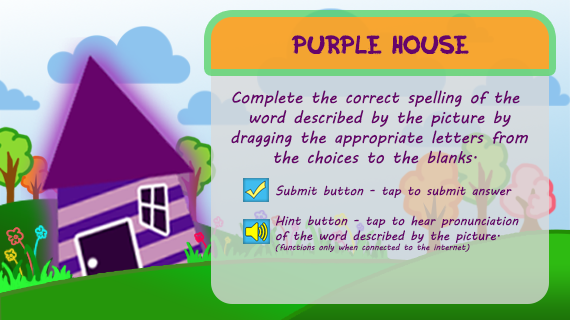
<style>
.page{position:relative;width:570px;height:320px}
.page>*{position:absolute;margin:0}
.t1{font:25px "Inky";color:#66046a}
.t2{font:16.7px "MVBoli";color:#66046a}
.t3{font:12.5px "MVBoli";color:#66046a}
.t4{font:8.3px "MVBoli";color:#66046a}
</style>
<div class="page">
<p class="t1" style="left:291px;top:35px;width:178px;height:20px">PURPLE HOUSE</p>
<p class="t2" style="left:231px;top:90px;width:297px;height:74px;text-align:center">Complete the correct spelling of the <br>word described by the picture by<br>dragging the appropriate letters from<br>the choices to the blanks.</p>
<p class="t3" style="left:275px;top:185px;width:244px;height:67px">Submit button - tap to submit answer<br><br>Hint button - tap to hear pronunciation<br>of the word described by the picture.<br><span class="t4">(functions only when connected to the internet)</span></p>
</div>
